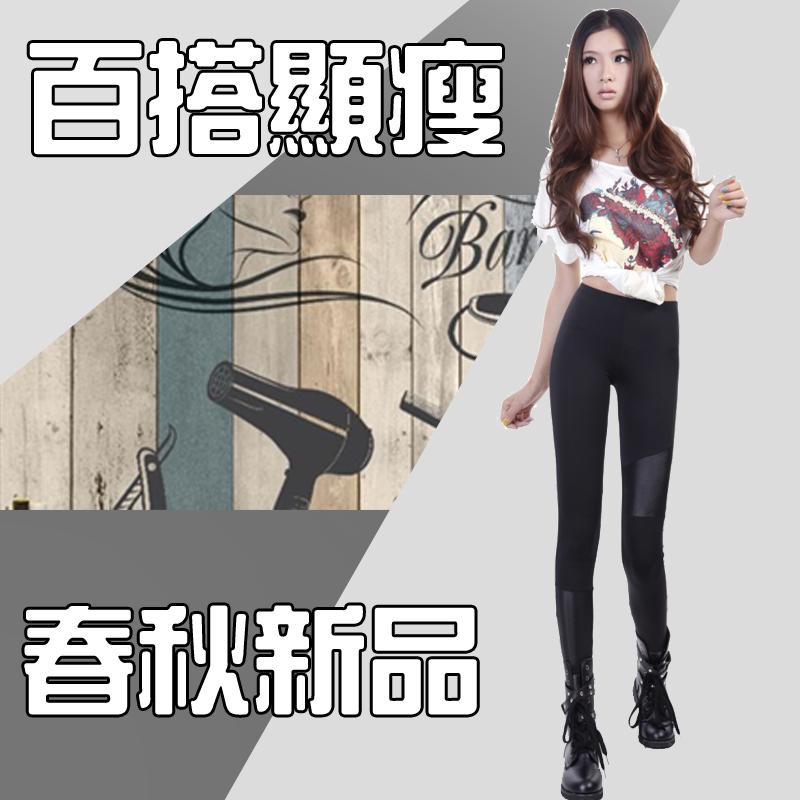
<style>
.page{position:relative;width:800px;height:800px;background:#dddcdc}
.page>*{position:absolute;margin:0}
.t1{font:119.8px "HanWangZonYi";color:#ffffff}
.t2{font:115.6px "HanWangZonYi";color:#ffffff}
</style>
<div class="page">
<p class="t1" style="left:29px;top:41px;width:473px;height:114px">百搭顯瘦</p>
<p class="t2" style="left:24px;top:605px;width:453px;height:110px">春秋新品</p>
</div>
